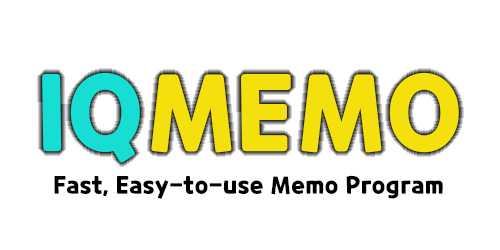
<style>
.page{position:relative;width:500px;height:250px;background:#ffffff}
.page>*{position:absolute;margin:0}
.t1{font:105px "CookieRun-Bold";color:#f3e00d}
.t2{font:105px "CookieRun-Bold";color:#16ded2}
.t3{font:24px "CookieRun-Bold";color:#000000}
</style>
<div class="page">
<p class="t1" style="left:42px;top:72px;width:417px;height:91px"><span class="t2">IQ</span>MEMO</p>
<p class="t3" style="left:54px;top:175px;width:389px;height:24px">Fast, Easy-to-use Memo Program</p>
</div>
